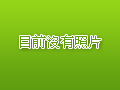
<style>
.page{position:relative;width:120px;height:90px}
.page>*{position:absolute;margin:0}
.t1{font:14px "MingLiU";color:#5f9d10}
</style>
<div class="page">
<p class="t1" style="left:20px;top:35px;width:81px;height:13px">目前沒有照片</p>
</div>
